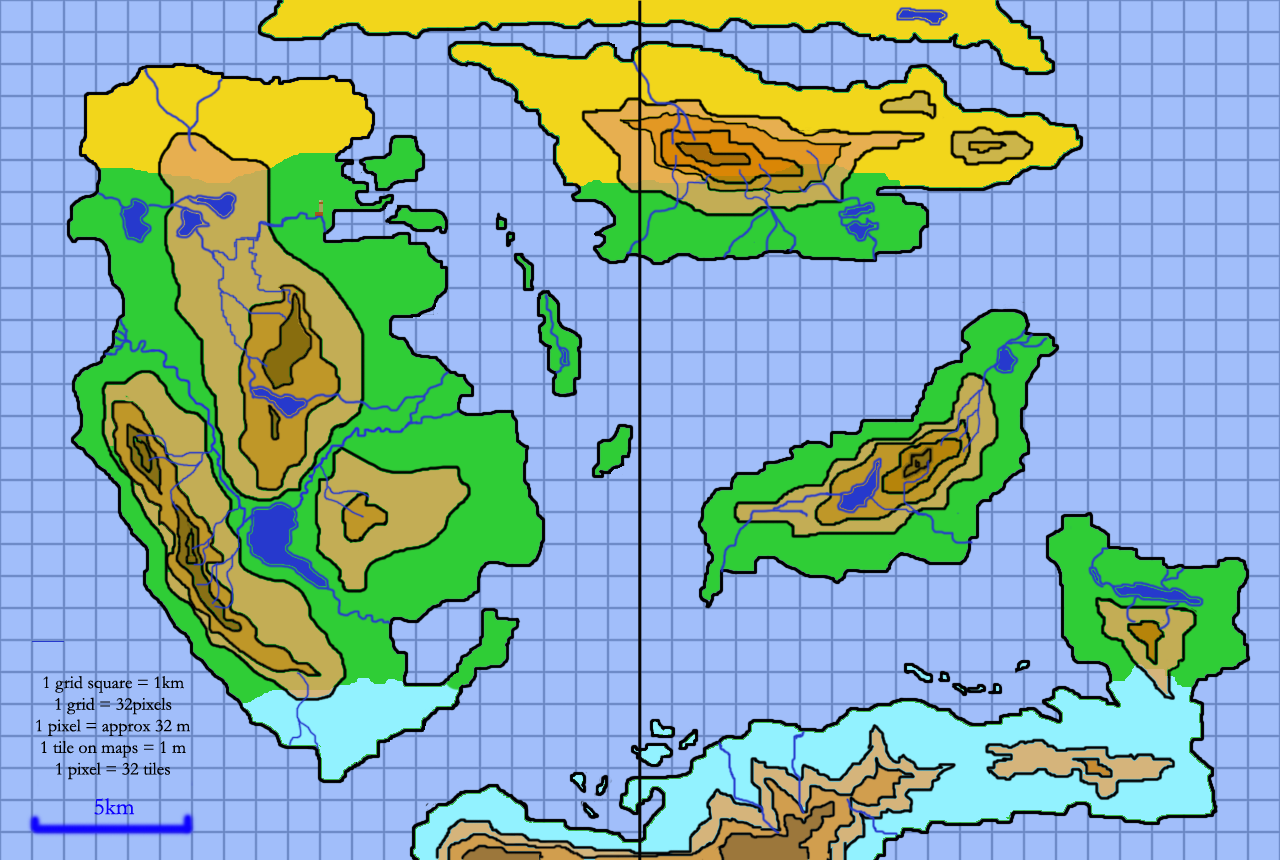
<style>
.page{position:relative;width:1280px;height:860px;background:#a1befa}
.page>*{position:absolute;margin:0}
.t1{font:18px "Garamond";color:#000000}
.t2{font:24px "Garamond";color:#0c00ff}
</style>
<div class="page">
<p class="t1" style="left:36px;top:676px;width:154px;height:104px;text-align:center">1 grid square = 1km<br>1 grid = 32pixels<br>1 pixel = approx 32 m<br>1 tile on maps = 1 m<br>1 pixel = 32 tiles</p>
<p class="t2" style="left:94px;top:798px;width:41px;height:17px">5km</p>
</div>
